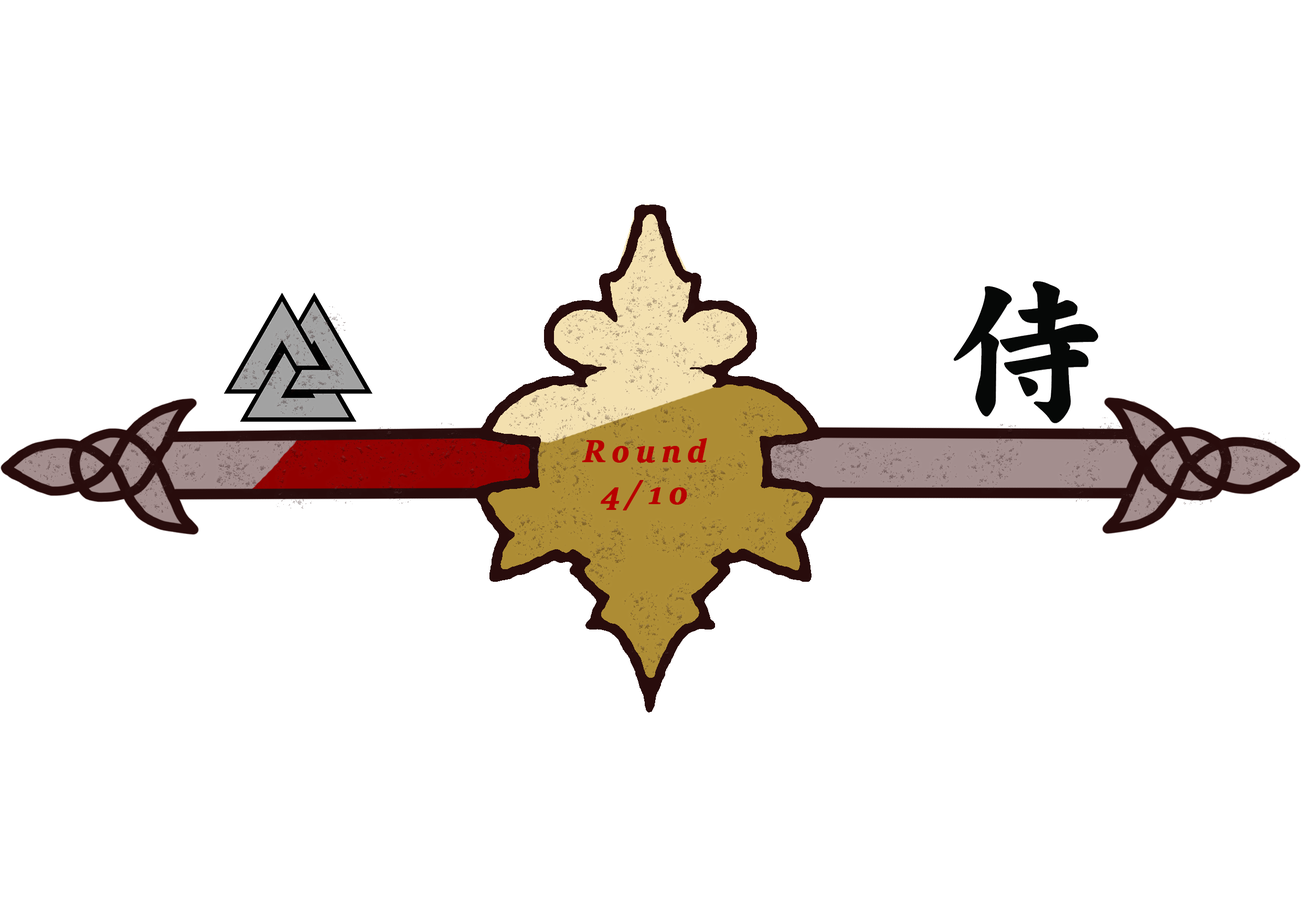
<style>
.page{position:relative;width:1301px;height:917px;background:#ffffff}
.page>*{position:absolute;margin:0}
.t1{font:35px "SitkaBanner-BoldItalic";letter-spacing:0.18em;color:#b80000;font-weight:bold}
</style>
<div class="page">
<p class="t1" style="left:582px;top:438px;width:125px;height:72px;text-align:center">Round 4/10</p>
</div>
